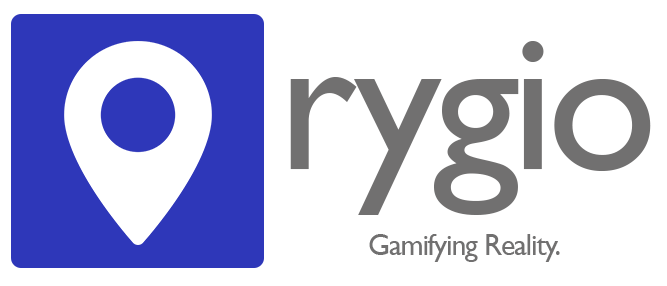
<style>
.page{position:relative;width:667px;height:286px;background:#ffffff}
.page>*{position:absolute;margin:0}
.t1{font:200px "GillSansMT";letter-spacing:-0.04em;color:#717070}
.t2{font:30px "GillSansMT";letter-spacing:-0.04em;color:#717070}
</style>
<div class="page">
<p class="t1" style="left:290px;top:41px;width:361px;height:174px">rygio</p>
<p class="t2" style="left:369px;top:234px;width:191px;height:28px">Gamifying Reality.</p>
</div>
